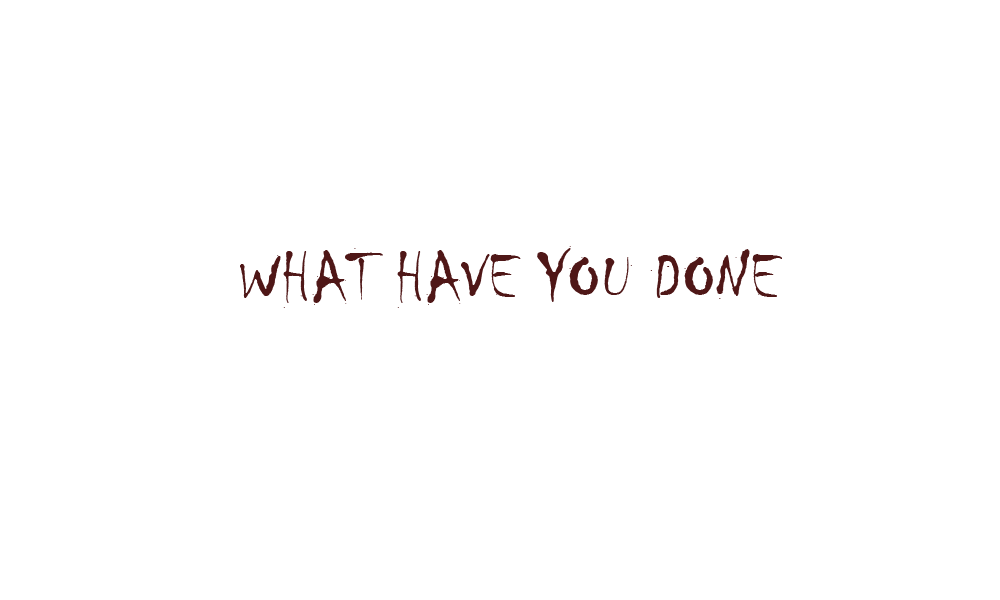
<style>
.page{position:relative;width:1000px;height:600px;background:#ffffff}
.page>*{position:absolute;margin:0}
.t1{font:72px "Chiller-Regular";color:#4f1717}
</style>
<div class="page">
<p class="t1" style="left:240px;top:246px;width:542px;height:62px">WHAT HAVE YOU DONE</p>
</div>
